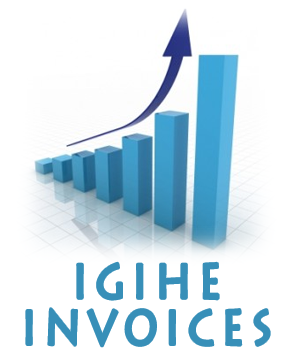
<style>
.page{position:relative;width:293px;height:355px;background:#ffffff}
.page>*{position:absolute;margin:0}
.t1{font:48px/46.3px "Krypta";letter-spacing:0.18em;color:#378fb8;font-weight:bold;scale:0.83 1}
</style>
<div class="page">
<p class="t1" style="left:26px;top:262px;width:244px;height:85px;text-align:center">IGIHE<br>Invoices</p>
</div>
